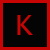
<style>
.page{position:relative;width:50px;height:50px;background:#040404}
.page>*{position:absolute;margin:0}
.t1{font:27.6px "LucidaGrande";color:#c70505}
</style>
<div class="page">
<p class="t1" style="left:17px;top:15px;width:16px;height:20px">K</p>
</div>
